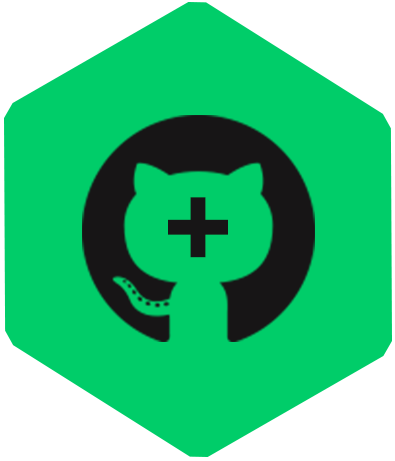
<style>
.page{position:relative;width:395px;height:461px;background:#00cd69}
.page>*{position:absolute;margin:0}
.t1{font:120px "Terminal";color:#171516}
</style>
<div class="page">
<p class="t1" style="left:168px;top:197px;width:60px;height:61px">+</p>
</div>
